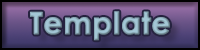
<style>
.page{position:relative;width:200px;height:50px}
.page>*{position:absolute;margin:0}
.t1{font:30px "CenturyGothic-Bold";color:#97b8c6;font-weight:bold}
</style>
<div class="page">
<p class="t1" style="left:30px;top:11px;width:140px;height:30px">Template</p>
</div>
